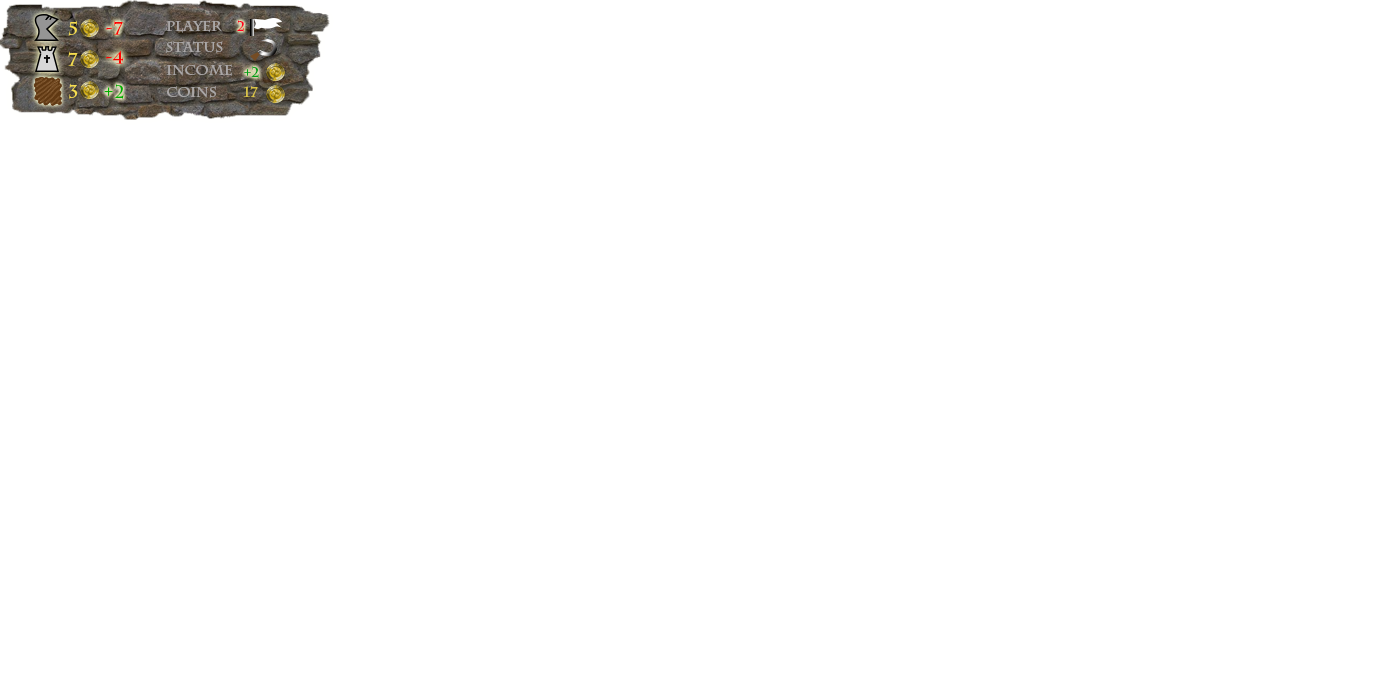
<style>
.page{position:relative;width:1400px;height:700px;background:#ffffff}
.page>*{position:absolute;margin:0}
.t1{font:18px "CharlemagneStd-Bold";color:#f7de50}
.t2{font:18px "CharlemagneStd-Bold";color:#ff0000}
.t3{font:14px "CharlemagneStd-Bold";color:#aaa7a7}
.t4{font:14px "CharlemagneStd-Bold";color:#ff001e}
.t5{font:14px "CharlemagneStd-Bold";color:#00a118}
.t6{font:18px "CharlemagneStd-Bold";color:#00b000}
.t7{font:14px "CharlemagneStd-Bold";color:#d9c348}
</style>
<div class="page">
<p class="t1" style="left:68px;top:20px;width:9px;height:16px">5</p>
<p class="t2" style="left:106px;top:20px;width:17px;height:15px">-7</p>
<p class="t3" style="left:166px;top:20px;width:56px;height:13px">Player</p>
<p class="t4" style="left:237px;top:20px;width:7px;height:12px">2</p>
<p class="t3" style="left:166px;top:41px;width:57px;height:13px">Status</p>
<p class="t1" style="left:68px;top:51px;width:10px;height:15px">7</p>
<p class="t2" style="left:106px;top:50px;width:18px;height:14px">-4</p>
<p class="t3" style="left:166px;top:64px;width:66px;height:12px">Income</p>
<p class="t5" style="left:244px;top:66px;width:15px;height:12px">+2</p>
<p class="t1" style="left:69px;top:83px;width:9px;height:16px">3</p>
<p class="t6" style="left:104px;top:83px;width:20px;height:17px">+2</p>
<p class="t3" style="left:167px;top:86px;width:49px;height:13px">Coins</p>
<p class="t7" style="left:243px;top:86px;width:15px;height:11px">17</p>
</div>
